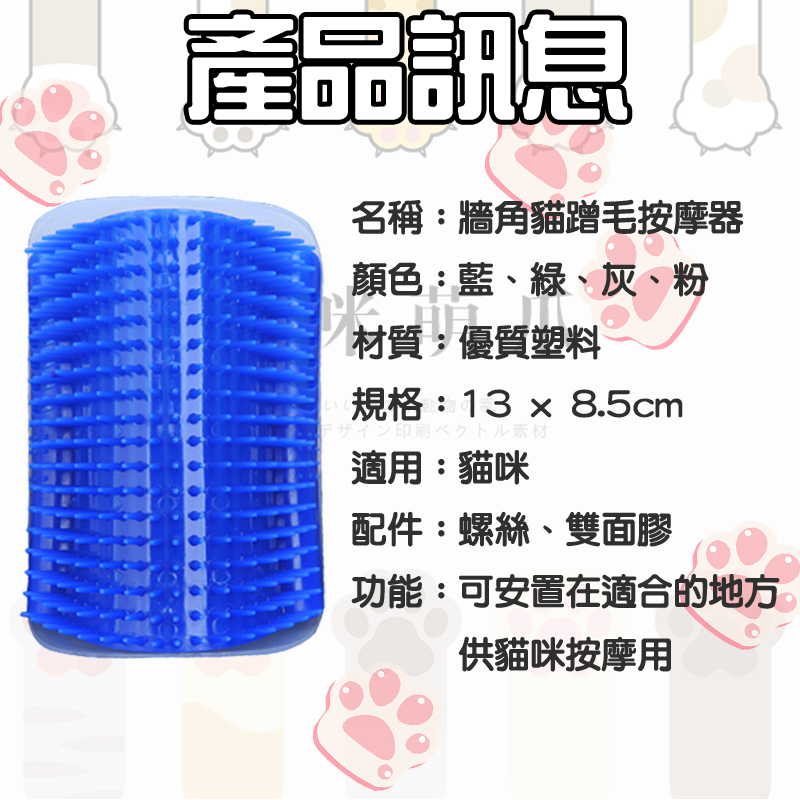
<style>
.page{position:relative;width:800px;height:800px;background:#fdfdfd}
.page>*{position:absolute;margin:0}
.t1{font:111.4px "HanWangZonYi";color:#ffffff}
.t2{font:35.7px "HanWangYenHeavy";color:#2f2f2f}
</style>
<div class="page">
<p class="t1" style="left:188px;top:14px;width:440px;height:106px">產品訊息</p>
<p class="t2" style="left:351px;top:199px;width:429px;height:473px">名稱：牆角貓蹭毛按摩器<br>顏色：藍、綠、灰、粉<br>材質：優質塑料<br>規格：13 x 8.5cm<br>適用：貓咪<br>配件：螺絲、雙面膠<br>功能：可安置在適合的地方<br>      供貓咪按摩用</p>
</div>
